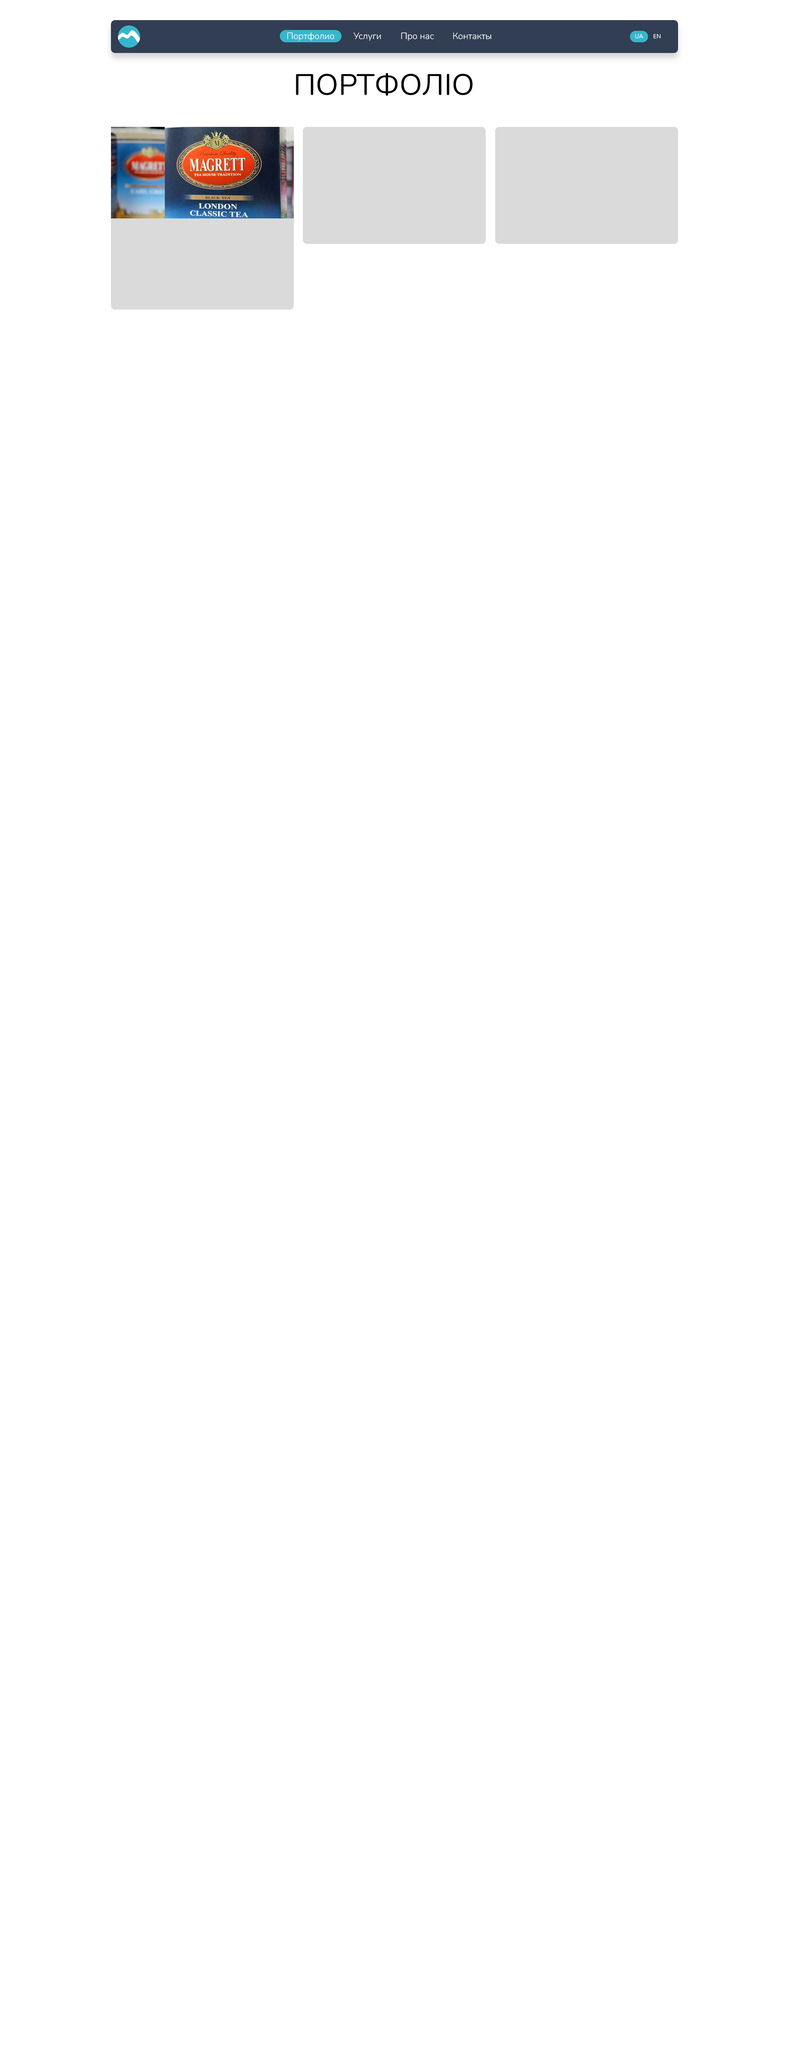
<style>
.page{position:relative;width:789px;height:2053px;background:#ffffff}
.page>*{position:absolute;margin:0}
.t1{font:9px "Nunito-Light";color:#ffffff}
.t2{font:5.7px "Nunito-Light";color:#ffffff}
.t3{font:29.6px "Nunito-Regular";color:#000000;text-transform:uppercase}
</style>
<div class="page">
<p class="t1" style="left:287px;top:32px;width:47px;height:9px">Портфолио</p>
<p class="t1" style="left:353px;top:32px;width:28px;height:9px">Услуги</p>
<p class="t1" style="left:401px;top:32px;width:33px;height:9px">Про нас</p>
<p class="t1" style="left:453px;top:32px;width:38px;height:7px">Контакты</p>
<p class="t2" style="left:635px;top:34px;width:8px;height:5px">UA</p>
<p class="t2" style="left:653px;top:34px;width:7px;height:5px">EN</p>
<p class="t3" style="left:296px;top:73px;width:176px;height:23px">Портфолiо</p>
</div>
